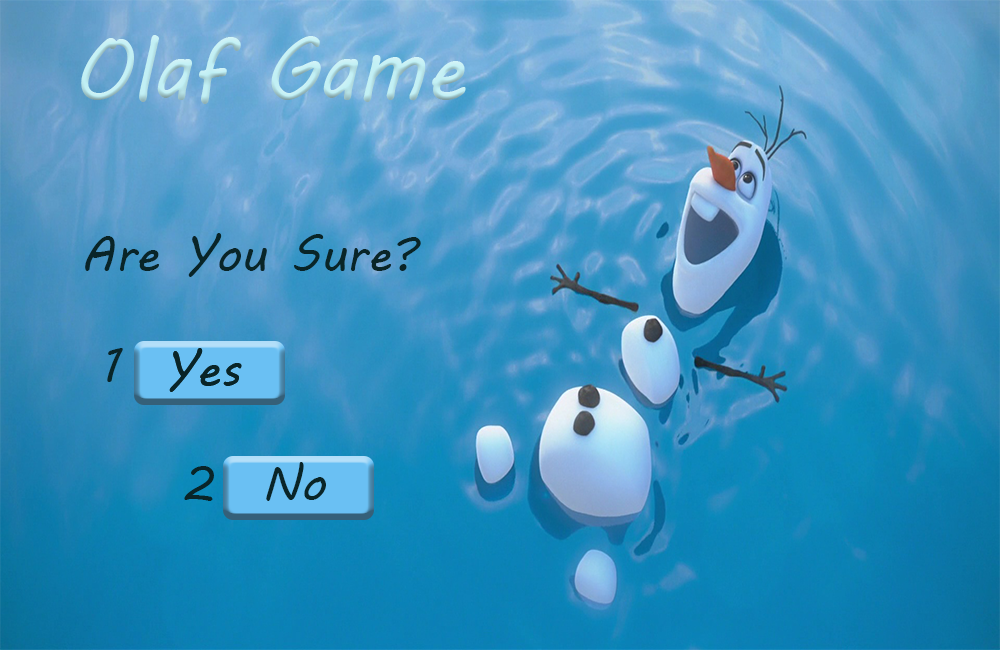
<style>
.page{position:relative;width:1000px;height:650px}
.page>*{position:absolute;margin:0}
.t1{font:88.9px "MVBoli";color:#c0eff4;scale:0.91 1}
.t2{font:48px "MVBoli";color:#092528}
</style>
<div class="page">
<p class="t1" style="left:81px;top:35px;width:385px;height:69px">Olaf Game</p>
<p class="t2" style="left:85px;top:233px;width:336px;height:44px">Are You Sure?</p>
<p class="t2" style="left:107px;top:348px;width:16px;height:34px">1</p>
<p class="t2" style="left:169px;top:348px;width:73px;height:44px">Yes</p>
<p class="t2" style="left:169px;top:348px;width:73px;height:44px">Yes</p>
<p class="t2" style="left:266px;top:462px;width:60px;height:39px">No</p>
<p class="t2" style="left:184px;top:466px;width:30px;height:35px">2</p>
</div>
